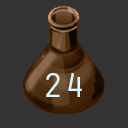
<style>
.page{position:relative;width:128px;height:128px;background:#333333}
.page>*{position:absolute;margin:0}
.t1{font:36px "OratorStd";color:#daf7ff}
</style>
<div class="page">
<p class="t1" style="left:46px;top:73px;width:36px;height:24px">24</p>
</div>
